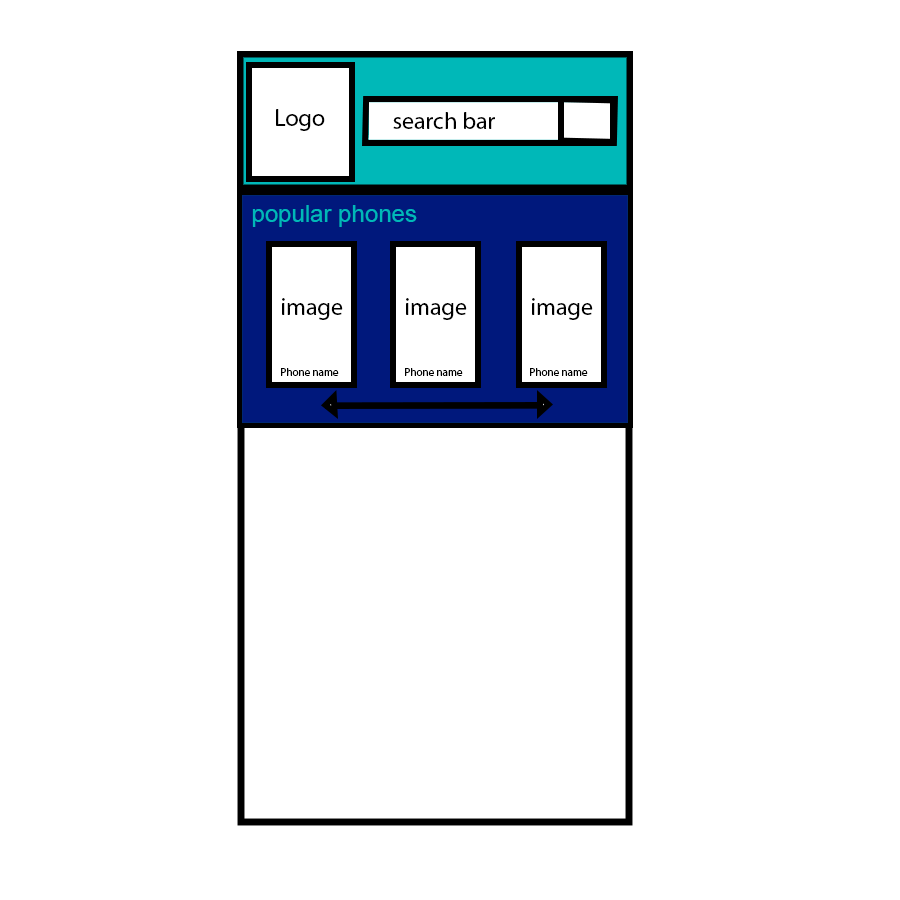
<style>
.page{position:relative;width:900px;height:900px;background:#ffffff}
.page>*{position:absolute;margin:0}
.t1{font:24px "MyriadPro-Regular";color:#000000}
.t2{font:24px "ArialMT";color:#00b8b8}
.t3{font:11px "MyriadPro-Regular";color:#000000}
</style>
<div class="page">
<p class="t1" style="left:276px;top:109px;width:49px;height:22px">Logo</p>
<p class="t1" style="left:393px;top:112px;width:102px;height:17px">search bar</p>
<p class="t2" style="left:252px;top:205px;width:165px;height:22px">popular phones</p>
<p class="t1" style="left:282px;top:298px;width:61px;height:22px">image</p>
<p class="t1" style="left:406px;top:298px;width:61px;height:22px">image</p>
<p class="t1" style="left:532px;top:298px;width:61px;height:22px">image</p>
<p class="t3" style="left:281px;top:368px;width:58px;height:8px">Phone name</p>
<p class="t3" style="left:405px;top:368px;width:58px;height:8px">Phone name</p>
<p class="t3" style="left:530px;top:368px;width:58px;height:8px">Phone name</p>
</div>
